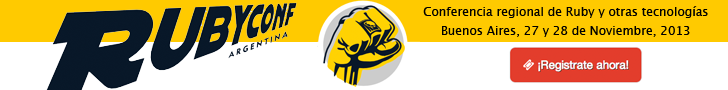
<style>
.page{position:relative;width:728px;height:90px;background:#ffffff}
.page>*{position:absolute;margin:0}
.t1{font:12px "LucidaGrande";color:#000000}
</style>
<div class="page">
<p class="t1" style="left:423px;top:6px;width:285px;height:12px">Conferencia regional de Ruby y otras tecnologías</p>
<p class="t1" style="left:442px;top:26px;width:248px;height:11px">Buenos Aires, 27 y 28 de Noviembre, 2013</p>
</div>
